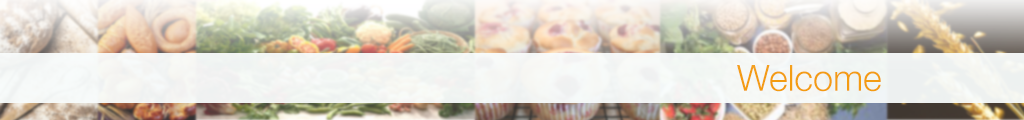
<style>
.page{position:relative;width:1024px;height:120px}
.page>*{position:absolute;margin:0}
.t1{font:36px "HelveticaNeue-Light";color:#f39c12}
</style>
<div class="page">
<p class="t1" style="left:737px;top:65px;width:144px;height:27px">Welcome</p>
</div>
